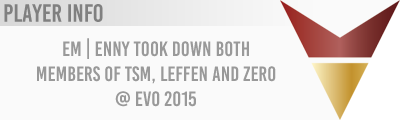
<style>
.page{position:relative;width:400px;height:120px;background:#fafafa}
.page>*{position:absolute;margin:0}
.t1{font:25px "BebasKai";color:#808080}
.t2{font:20.8px "BebasKai";color:#999999}
</style>
<div class="page">
<p class="t1" style="left:4px;top:4px;width:99px;height:18px">Player Info</p>
<p class="t2" style="left:37px;top:38px;width:239px;height:69px;text-align:center">em | enny took down Both<br>members of TSM, leffen and Zero<br>@ evo 2015</p>
</div>
